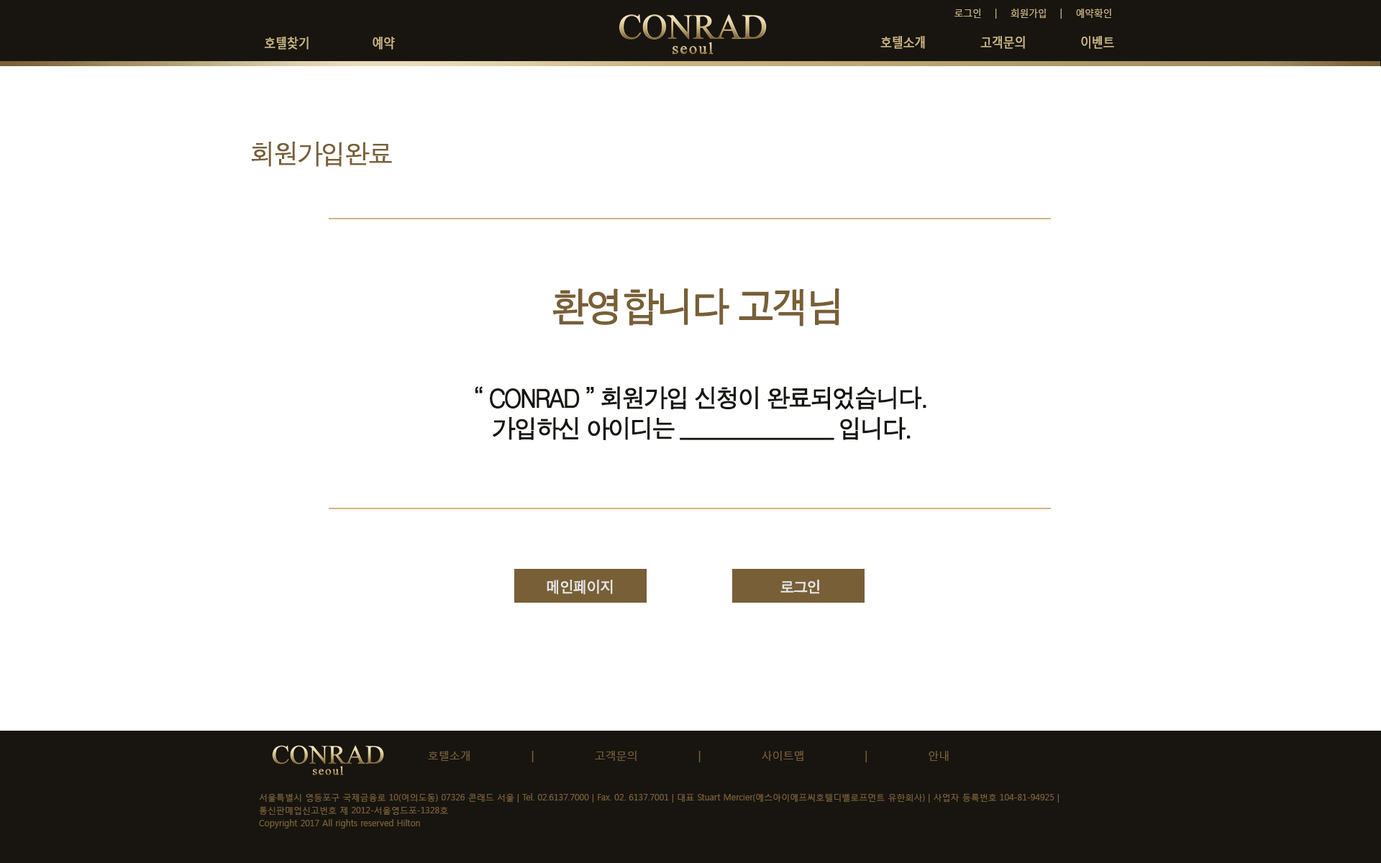
<style>
.page{position:relative;width:1381px;height:863px;background:#ffffff}
.page>*{position:absolute;margin:0}
.t1{font:10.1px "MalgunGothicRegular";color:#cbb682;scale:0.9 1}
.t2{font:12.9px "MalgunGothicRegular";letter-spacing:-0.05em;color:#cbb682;font-weight:bold;scale:0.9 1}
.t3{font:27.3px "Dotum";letter-spacing:-0.1em;color:#785f37;font-weight:bold;scale:0.93 1}
.t4{font:40.9px "Dotum";letter-spacing:-0.1em;color:#785f37;font-weight:bold;scale:0.93 1}
.t5{font:25.5px "Dotum";letter-spacing:-0.1em;color:#181510;font-weight:bold;scale:0.93 1}
.t6{font:15.7px "Dotum";letter-spacing:-0.1em;color:#e6e6e6;font-weight:bold;scale:0.93 1}
.t7{font:10.8px "MalgunGothicRegular";color:#785f37}
.t8{font:8.6px/12.9px "MalgunGothicRegular";color:#785f37}
</style>
<div class="page">
<p class="t1" style="left:955px;top:9px;width:156px;height:10px">로그인 | 회원가입 | 예약확인</p>
<p class="t2" style="left:264px;top:37px;width:45px;height:13px">호텔찾기</p>
<p class="t2" style="left:373px;top:37px;width:22px;height:13px">예약</p>
<p class="t2" style="left:881px;top:36px;width:233px;height:13px">호텔소개 고객문의 이벤트</p>
<p class="t3" style="left:251px;top:142px;width:141px;height:25px">회원가입완료</p>
<p class="t4" style="left:553px;top:288px;width:287px;height:39px">환영합니다 고객님</p>
<p class="t5" style="left:475px;top:386px;width:452px;height:54px">“ CONRAD ” 회원가입 신청이 완료되었습니다.<br>   가입하신 아이디는 _______________ 입니다.</p>
<p class="t6" style="left:547px;top:580px;width:66px;height:15px">메인페이지</p>
<p class="t6" style="left:781px;top:580px;width:38px;height:14px">로그인</p>
<p class="t7" style="left:428px;top:751px;width:521px;height:12px">호텔소개 | 고객문의 | 사이트맵 | 안내</p>
<p class="t8" style="left:259px;top:794px;width:800px;height:35px">서울특별시 영등포구 국제금융로 10(여의도동) 07326 콘래드 서울 | Tel. 02.6137.7000 | Fax. 02. 6137.7001 | 대표 Stuart Mercier(에스아이에프씨호텔디벨로프먼트 유한회사) | 사업자 등록번호 104-81-94925 | 통신판매업신고번호 제 2012-서울영드포-1328호<br>Copyright 2017 All rights reserved Hilton</p>
</div>
